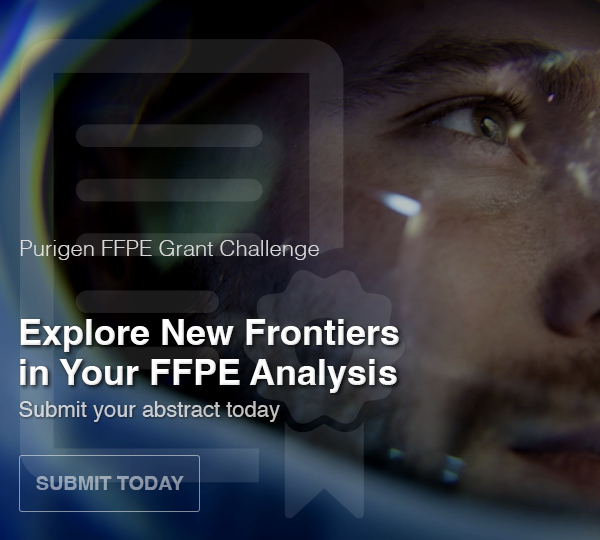
<style>
.page{position:relative;width:600px;height:540px}
.page>*{position:absolute;margin:0}
.t1{font:22px "Helvetica-Light";color:#d7d7d7}
.t2{font:36px/40px "Helvetica-Bold";color:#ffffff}
.t3{font:22px "Helvetica";color:#c7cbd2}
.t4{font:20px "Helvetica-Bold";letter-spacing:-0.01em;color:#8f9bb0;text-transform:uppercase}
</style>
<div class="page">
<p class="t1" style="left:20px;top:240px;width:299px;height:20px">Purigen FFPE Grant Challenge</p>
<p class="t2" style="left:20px;top:319px;width:379px;height:74px">Explore New Frontiers<br>in Your FFPE Analysis</p>
<p class="t3" style="left:19px;top:401px;width:261px;height:21px">Submit your abstract today</p>
<p class="t4" style="left:36px;top:476px;width:148px;height:14px">Submit Today</p>
</div>
